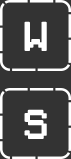
<style>
.page{position:relative;width:71px;height:159px;background:#333333}
.page>*{position:absolute;margin:0}
.t1{font:37px "PixelSplitter-Bold";color:#ffffff}
</style>
<div class="page">
<p class="t1" style="left:24px;top:21px;width:23px;height:30px">W</p>
<p class="t1" style="left:24px;top:109px;width:23px;height:30px">S</p>
</div>
